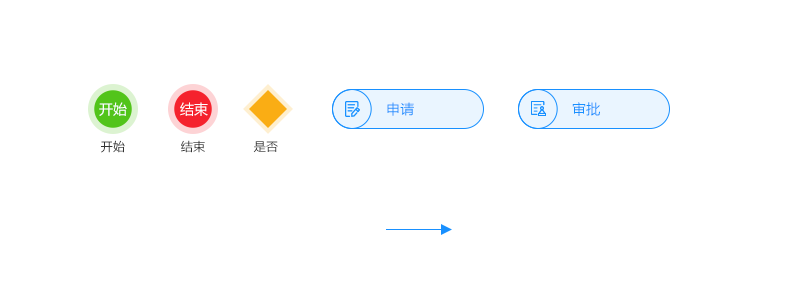
<style>
.page{position:relative;width:786px;height:300px;background:#ffffff}
.page>*{position:absolute;margin:0}
.t1{font:14px "MicrosoftYaHei";color:#ffffff}
.t2{font:14px "MicrosoftYaHei";letter-spacing:0.02em;color:#1890ff}
.t3{font:12px "MicrosoftYaHei";letter-spacing:0.02em;color:#333333}
.t4{font:12px "MicrosoftYaHei";letter-spacing:0.02em}
</style>
<div class="page">
<p class="t1" style="left:99px;top:102px;width:28px;height:14px">开始</p>
<p class="t1" style="left:180px;top:102px;width:28px;height:14px">结束</p>
<p class="t2" style="left:387px;top:102px;width:27px;height:14px">申请</p>
<p class="t2" style="left:572px;top:102px;width:28px;height:14px">审批</p>
<p class="t3" style="left:101px;top:140px;width:24px;height:13px">开始</p>
<p class="t3" style="left:181px;top:140px;width:24px;height:13px">结束</p>
<p class="t4" style="left:253px;top:141px;width:25px;height:12px">是否</p>
</div>
